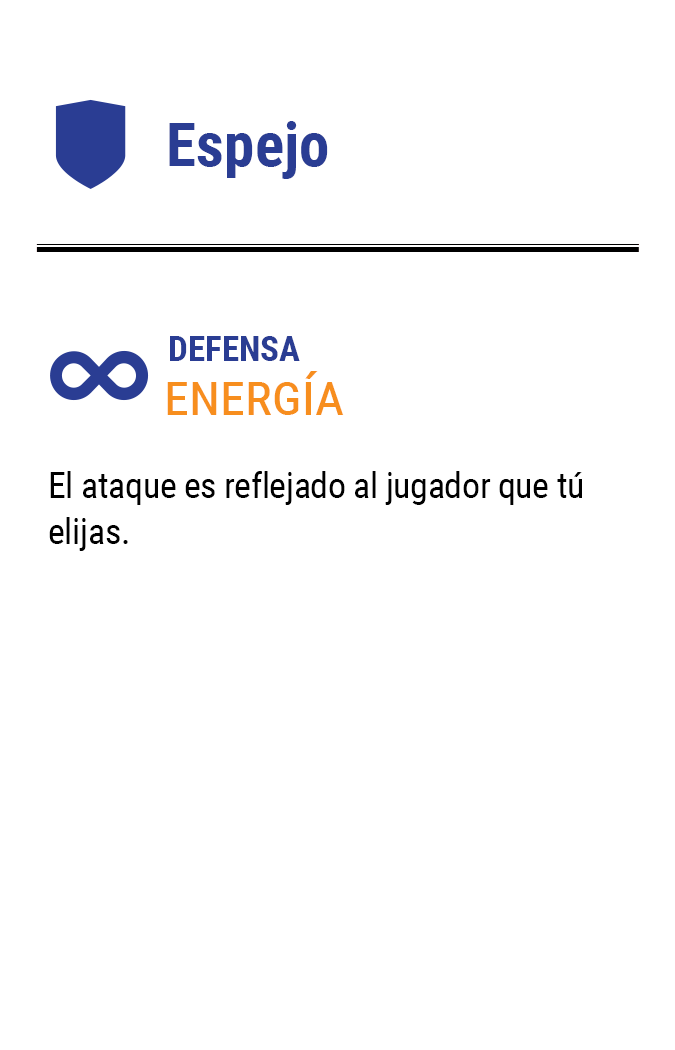
<style>
.page{position:relative;width:675px;height:1050px;background:#ffffff}
.page>*{position:absolute;margin:0}
.t1{font:61.2px "RobotoCondensed-Bold";color:#2a3d93}
.t2{font:35px "RobotoCondensed-Bold";color:#2a3d93}
.t3{font:58.3px "RobotoCondensed-Regular";color:#f78e1e;font-variant:small-caps}
.t4{font:35.8px/45.8px "RobotoCondensed-Regular";letter-spacing:-0.01em;color:#000000}
</style>
<div class="page">
<p class="t1" style="left:169px;top:121px;width:159px;height:58px">Espejo</p>
<p class="t2" style="left:170px;top:336px;width:130px;height:25px">DEFENSA</p>
<p class="t3" style="left:167px;top:371px;width:177px;height:44px">energía</p>
<p class="t4" style="left:49px;top:471px;width:533px;height:80px">El ataque es reflejado al jugador que tú elijas.</p>
</div>
